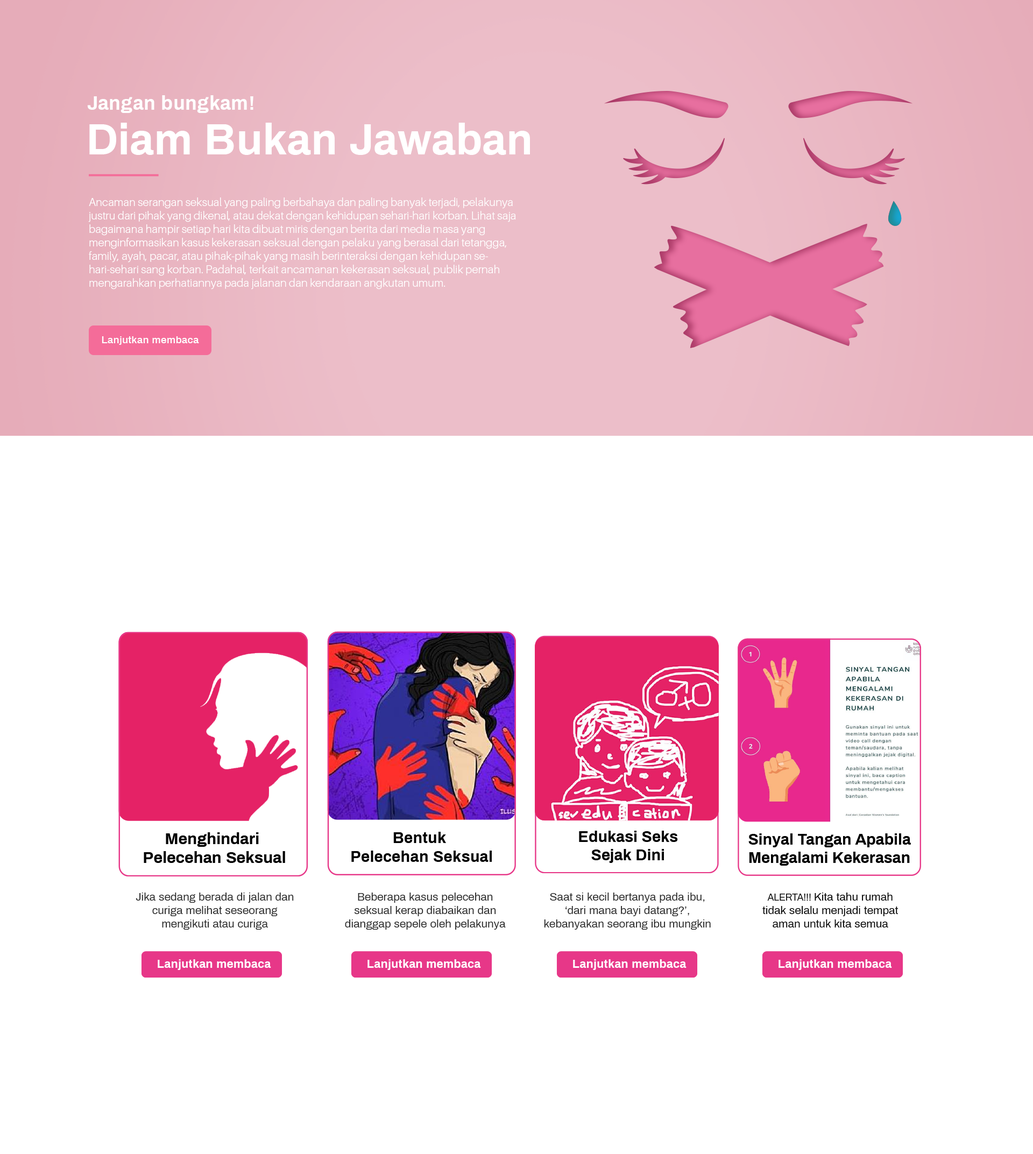
<style>
.page{position:relative;width:1033px;height:1154px;background:#ffffff}
.page>*{position:absolute;margin:0}
.t1{font:19.6px "Archivo-Bold";color:#ffffff}
.t2{font:43.4px "Archivo-Bold";color:#ffffff}
.t3{font:11.2px "Aileron-Light";color:#ffffff}
.t4{font:11.2px "Archivo-Regular";color:#2b2b2b}
.t5{font:11.2px "Archivo-Regular";color:#000000}
.t6{font:9.4px "Archivo-Regular";color:#000000}
</style>
<div class="page">
<p class="t1" style="left:87px;top:95px;width:166px;height:18px">Jangan bungkam!</p>
<p class="t2" style="left:89px;top:123px;width:441px;height:32px">Diam Bukan Jawaban</p>
<p class="t3" style="left:88px;top:197px;width:428px;height:92px">Ancaman serangan seksual yang paling berbahaya dan paling banyak terjadi, pelakunya justru dari pihak yang dikenal, atau dekat dengan kehidupan sehari-hari korban. Lihat saja bagaimana hampir setiap hari kita dibuat miris dengan berita dari media masa yang menginformasikan kasus kekerasan seksual dengan pelaku yang berasal dari tetangga, family, ayah, pacar, atau pihak-pihak yang masih berinteraksi dengan kehidupan sehari-sehari sang korban. Padahal, terkait ancamanan kekerasan seksual, publik pernah mengarahkan perhatiannya pada jalanan dan kendaraan angkutan umum.</p>
<p class="t4" style="left:136px;top:893px;width:158px;height:37px;text-align:center">Jika sedang berada di jalan dan curiga melihat seseorang mengikuti atau curiga</p>
<p class="t4" style="left:345px;top:893px;width:161px;height:37px;text-align:center">Beberapa kasus pelecehan seksual kerap diabaikan dan dianggap sepele oleh pelakunya</p>
<p class="t4" style="left:544px;top:893px;width:167px;height:37px;text-align:center">Saat si kecil bertanya pada ibu, ‘dari mana bayi datang?’, kebanyakan seorang ibu mungkin</p>
<p class="t5" style="left:762px;top:893px;width:137px;height:35px;text-align:center"><span class="t6">ALERTA!!! </span>Kita tahu rumah <br>tidak selalu menjadi tempat <br>aman untuk kita semua</p>
</div>
